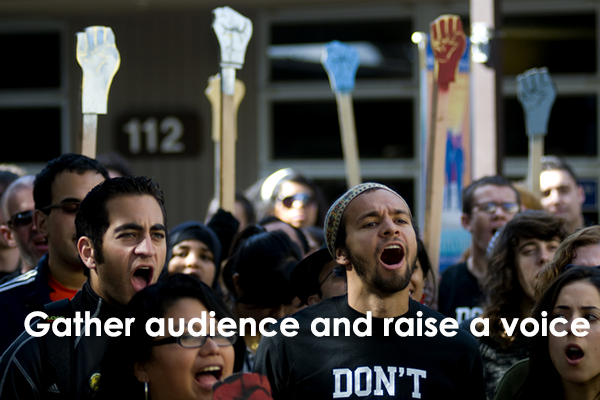
<style>
.page{position:relative;width:600px;height:400px}
.page>*{position:absolute;margin:0}
.t1{font:33.3px "CenturyGothic-Bold";color:#fdfdfd}
</style>
<div class="page">
<p class="t1" style="left:24px;top:311px;width:566px;height:26px">Gather audience and raise a voice</p>
</div>
